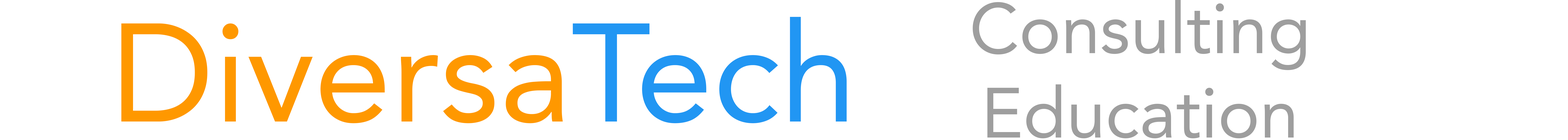
<style>
.page{position:relative;width:1568px;height:140px;background:#ffffff}
.page>*{position:absolute;margin:0}
.t1{font:70.6px "Avenir-Roman";color:#9e9e9e}
.t2{font:138.8px "Avenir-Roman";color:#ff9800}
.t3{font:138.8px "Avenir-Roman";color:#2196f3}
</style>
<div class="page">
<p class="t1" style="left:973px;top:0px;width:333px;height:139px;text-align:center">Consulting Education</p>
<p class="t2" style="left:121px;top:17px;width:726px;height:107px">Diversa<span class="t3">Tech</span></p>
</div>
